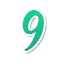
<style>
.page{position:relative;width:64px;height:64px;background:#ffffff}
.page>*{position:absolute;margin:0}
.t1{font:72px "MaroonedOnMarsBB";color:#1dc28e}
</style>
<div class="page">
<p class="t1" style="left:22px;top:10px;width:22px;height:41px">9</p>
</div>
